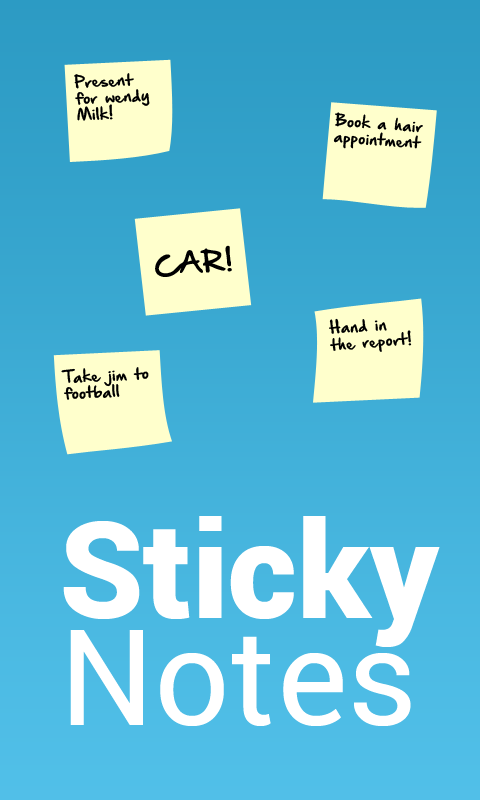
<style>
.page{position:relative;width:480px;height:800px}
.page>*{position:absolute;margin:0}
.t1{font:13.7px "HandOfSeanDemo";color:#000000;scale:1.07 1}
.t2{font:24px "HandOfSeanDemo";color:#000000;scale:1.07 1}
.t3{font:133.7px/107.5px "Roboto-Black";color:#ffffff}
.t4{font:133.7px/107.5px "Roboto-Regular";color:#ffffff}
</style>
<div class="page">
<p class="t1" style="left:74px;top:73px;width:76px;height:48px;rotate:-3deg">Present for wendy<br>Milk!</p>
<p class="t1" style="left:333px;top:112px;width:90px;height:37px;rotate:4deg">Book a hair<br>appointment</p>
<p class="t2" style="left:155px;top:245px;width:77px;height:32px;rotate:-5deg">CAR!</p>
<p class="t1" style="left:329px;top:318px;width:83px;height:34px;rotate:-4deg">Hand in the report!</p>
<p class="t1" style="left:61px;top:367px;width:88px;height:33px;rotate:-3deg">Take jim to football</p>
<p class="t3" style="left:63px;top:516px;width:377px;height:210px">Sticky<br><span class="t4">Notes</span></p>
</div>
